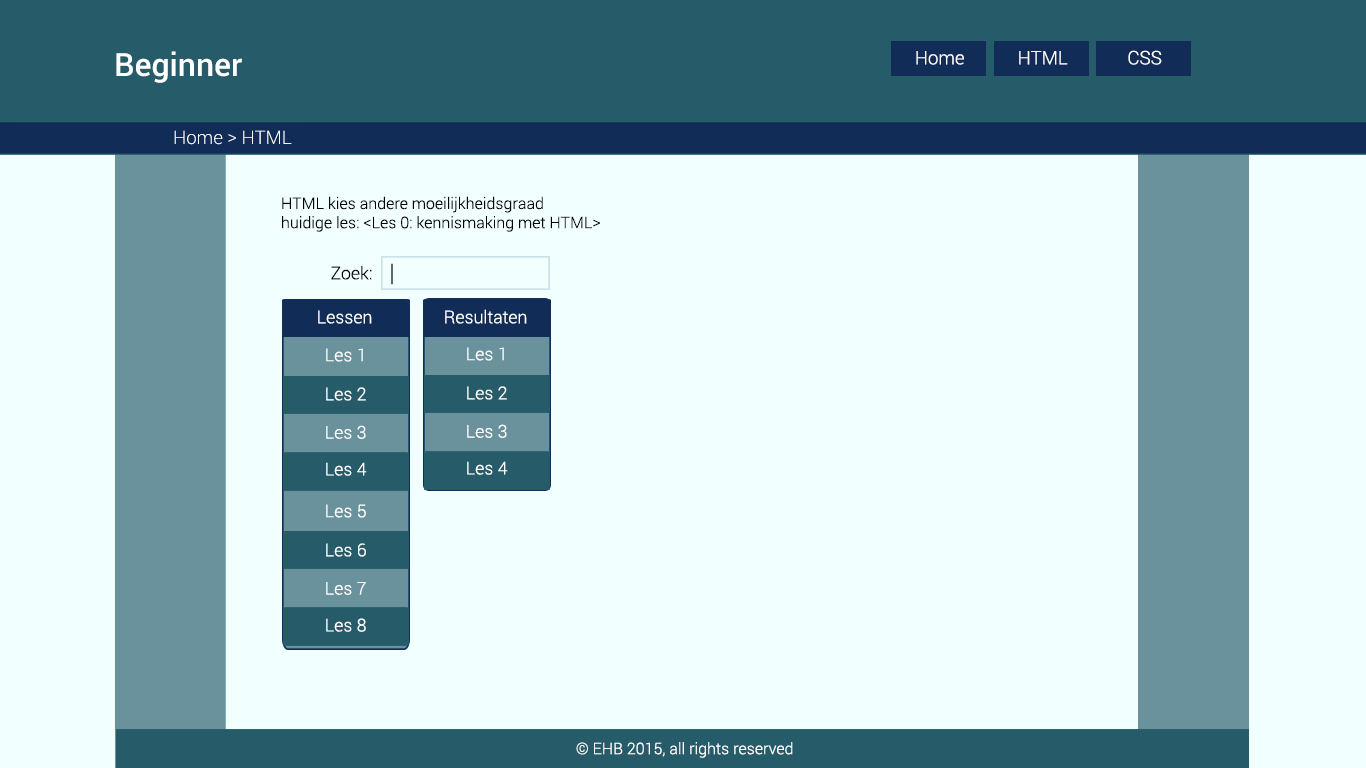
<style>
.page{position:relative;width:1366px;height:768px;background:#f1ffff}
.page>*{position:absolute;margin:0}
.t1{font:32px "Roboto-Medium";color:#ffffff}
.t2{font:18.7px "Roboto-Light";color:#ffffff}
.t3{font:16px "Roboto-Light";color:#000000}
.t4{font:17.7px "Roboto-Light";color:#000000}
.t5{font:24px "Roboto-Light"}
.t6{font:17.7px "Roboto-Light";color:#ffffff}
.t7{font:16px "Roboto-Light";color:#ffffff}
</style>
<div class="page">
<p class="t1" style="left:116px;top:51px;width:126px;height:32px">Beginner</p>
<p class="t2" style="left:916px;top:51px;width:48px;height:14px">Home</p>
<p class="t2" style="left:1019px;top:51px;width:49px;height:14px">HTML</p>
<p class="t2" style="left:1128px;top:50px;width:34px;height:15px">CSS</p>
<p class="t2" style="left:174px;top:130px;width:118px;height:15px">Home &gt; HTML</p>
<p class="t3" style="left:282px;top:196px;width:318px;height:36px">HTML kies andere moeilijkheidsgraad<br>huidige les: &lt;Les 0: kennismaking met HTML&gt;</p>
<p class="t4" style="left:331px;top:265px;width:41px;height:15px">Zoek:</p>
<p class="t5" style="left:391px;top:263px;width:2px;height:22px">|</p>
<p class="t6" style="left:318px;top:310px;width:54px;height:14px">Lessen</p>
<p class="t6" style="left:445px;top:309px;width:82px;height:15px">Resultaten</p>
<p class="t6" style="left:326px;top:348px;width:37px;height:14px">Les 1</p>
<p class="t6" style="left:467px;top:347px;width:37px;height:14px">Les 1</p>
<p class="t6" style="left:326px;top:387px;width:40px;height:14px">Les 2</p>
<p class="t6" style="left:467px;top:386px;width:40px;height:14px">Les 2</p>
<p class="t6" style="left:326px;top:425px;width:40px;height:14px">Les 3</p>
<p class="t6" style="left:467px;top:424px;width:40px;height:14px">Les 3</p>
<p class="t6" style="left:326px;top:462px;width:41px;height:14px">Les 4</p>
<p class="t6" style="left:467px;top:461px;width:41px;height:14px">Les 4</p>
<p class="t6" style="left:326px;top:504px;width:40px;height:14px">Les 5</p>
<p class="t6" style="left:326px;top:543px;width:40px;height:14px">Les 6</p>
<p class="t6" style="left:326px;top:582px;width:40px;height:13px">Les 7</p>
<p class="t6" style="left:326px;top:618px;width:40px;height:14px">Les 8</p>
<p class="t7" style="left:576px;top:742px;width:217px;height:16px">© EHB 2015, all rights reserved</p>
</div>
